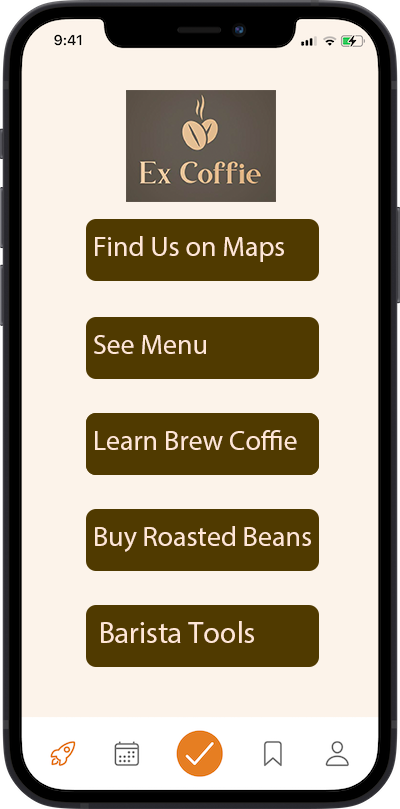
<style>
.page{position:relative;width:400px;height:809px;background:#fcf3ea}
.page>*{position:absolute;margin:0}
.t1{font:28px "MyriadPro-Regular";color:#ffe6d6}
.t2{font:30px "MyriadPro-Regular";color:#ffe6d6}
</style>
<div class="page">
<p class="t1" style="left:95px;top:236px;width:189px;height:26px">Find Us on Maps</p>
<p class="t1" style="left:94px;top:335px;width:112px;height:19px">See Menu</p>
<p class="t1" style="left:95px;top:430px;width:202px;height:20px">Learn Brew Coffie</p>
<p class="t1" style="left:95px;top:526px;width:216px;height:26px">Buy Roasted Beans</p>
<p class="t2" style="left:101px;top:621px;width:153px;height:22px">Barista Tools</p>
</div>
